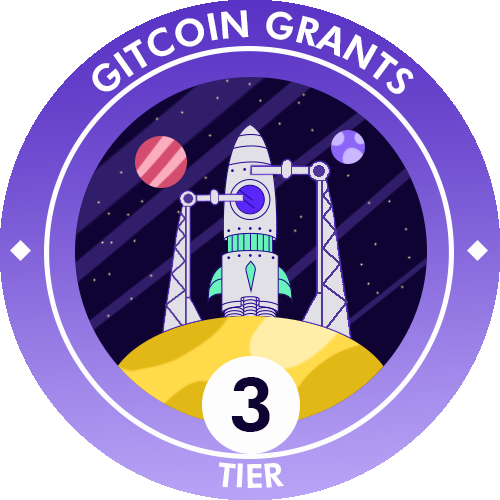
<style>
.page{position:relative;width:500px;height:500px;background:#ffffff}
.page>*{position:absolute;margin:0}
.t1{font:37.5px "FuturaBT-Heavy";color:#ffffff}
.t2{font:75px "FuturaBT-Heavy";color:#0e0333}
.t3{font:33.3px "FuturaBT-Heavy";color:#ffffff}
</style>
<div class="page">
<p class="t1" style="left:92px;top:10px;width:322px;height:84px;text-align:center">GITCOIN GRANTS</p>
<p class="t2" style="left:231px;top:377px;width:39px;height:55px">3</p>
<p class="t3" style="left:219px;top:462px;width:65px;height:26px">TIER</p>
</div>
